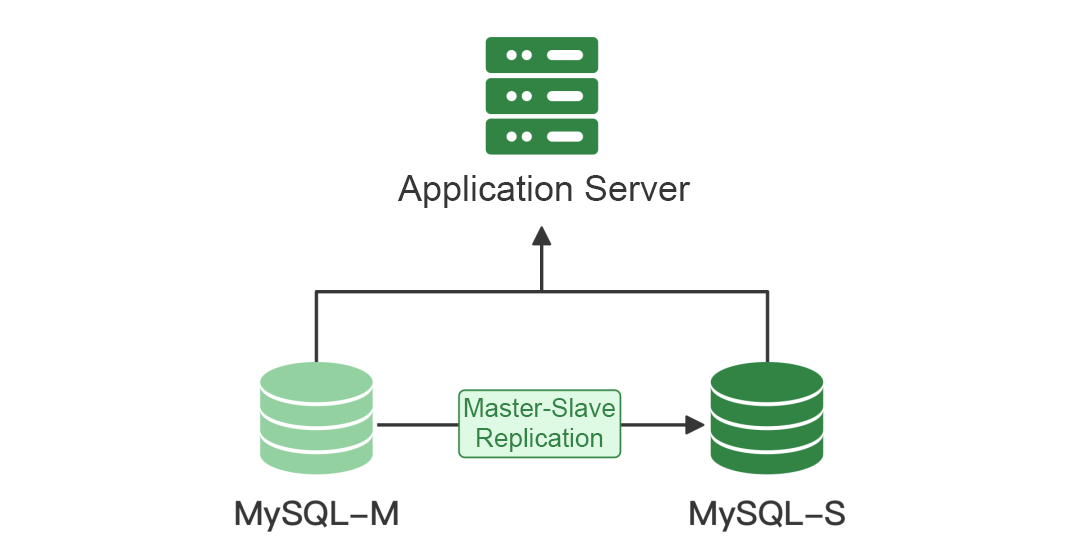
<style>
.page{position:relative;width:1080px;height:557px;background:#ffffff}
.page>*{position:absolute;margin:0}
.t1{font:36px "ArialMT";color:#363636}
.t2{font:26px/30px "ArialMT";color:#328444}
</style>
<div class="page">
<p class="t1" style="left:398px;top:175px;width:293px;height:33px">Application Server</p>
<p class="t2" style="left:464px;top:398px;width:151px;height:54px;text-align:center">Master-Slave Replication</p>
</div>
